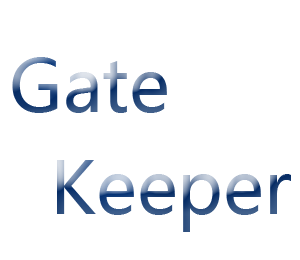
<style>
.page{position:relative;width:300px;height:260px;background:#ffffff}
.page>*{position:absolute;margin:0}
.t1{font:72px "MicrosoftYaHei"}
</style>
<div class="page">
<p class="t1" style="left:12px;top:57px;width:155px;height:56px">Gate</p>
<p class="t1" style="left:57px;top:160px;width:234px;height:72px">Keeper</p>
</div>
